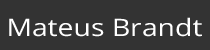
<style>
.page{position:relative;width:210px;height:50px;background:#333333}
.page>*{position:absolute;margin:0}
.t1{font:24px "OpenSans";color:#ffffff;scale:1.18 1}
</style>
<div class="page">
<p class="t1" style="left:9px;top:17px;width:193px;height:20px">Mateus Brandt</p>
</div>
